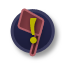
<style>
.page{position:relative;width:64px;height:64px;background:#ffffff}
.page>*{position:absolute;margin:0}
.t1{font:30px "HoboStd";color:#b9b200}
</style>
<div class="page">
<p class="t1" style="left:30px;top:18px;width:7px;height:26px">!</p>
</div>
